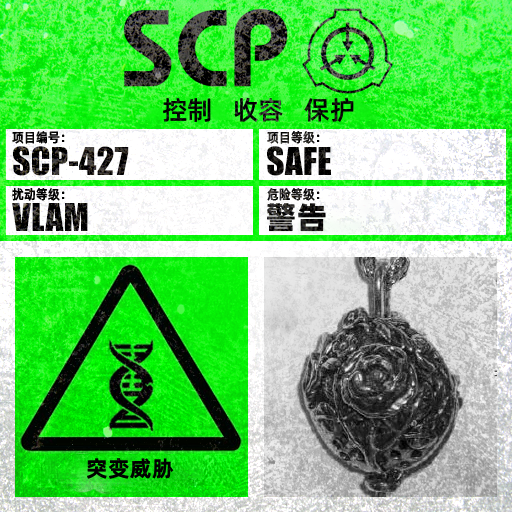
<style>
.page{position:relative;width:512px;height:512px}
.page>*{position:absolute;margin:0}
.t1{font:26px "AlibabaPuHuiTiM";color:#000000}
.t2{font:13.3px "AlibabaPuHuiTiM";letter-spacing:0.02em;color:#000000;scale:0.9 1}
.t3{font:13.3px "AlibabaPuHuiTiM";letter-spacing:0.02em;scale:0.9 1}
.t4{font:30.3px "AlibabaPuHuiTiH";letter-spacing:0.02em}
.t5{font:22px "AlibabaPuHuiTiB";letter-spacing:0.02em;color:#000000}
</style>
<div class="page">
<p class="t1" style="left:163px;top:97px;width:191px;height:26px">控制   收容   保护</p>
<p class="t2" style="left:12px;top:131px;width:53px;height:13px">项目编号：</p>
<p class="t3" style="left:267px;top:131px;width:53px;height:13px">项目等级：</p>
<p class="t2" style="left:12px;top:188px;width:53px;height:13px">扰动等级：</p>
<p class="t3" style="left:267px;top:188px;width:53px;height:13px">危险等级：</p>
<p class="t4" style="left:267px;top:203px;width:59px;height:29px">警告</p>
<p class="t5" style="left:87px;top:458px;width:87px;height:21px">突变威胁</p>
</div>
